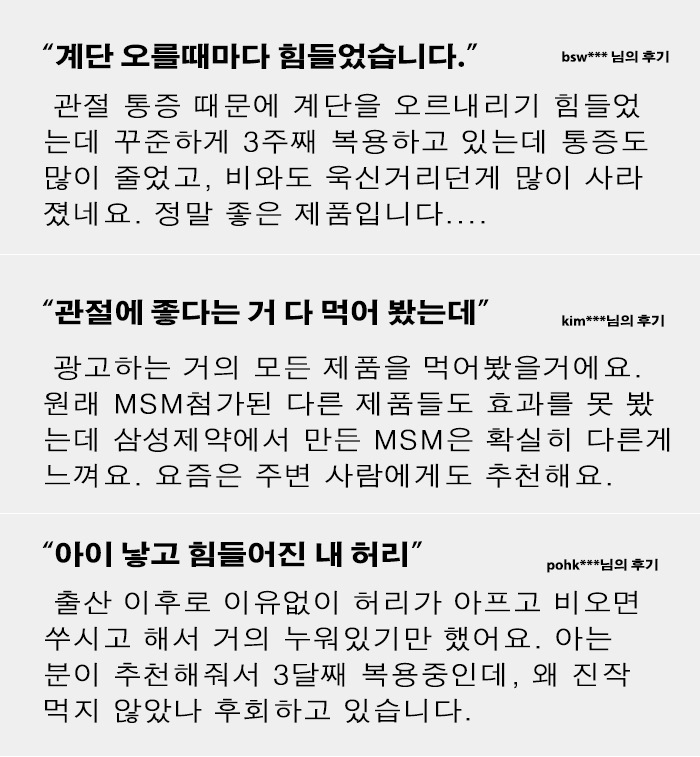
<style>
.page{position:relative;width:700px;height:757px;background:#efefef}
.page>*{position:absolute;margin:0}
.t1{font:27px "AdobeGothicStd-Bold";color:#000000;scale:1.11 1}
.t2{font:12.6px "AdobeGothicStd-Bold";color:#000000;scale:1.11 1}
.t3{font:27px/36px "H2gtrM";color:#000000;scale:1.11 1}
.t4{font:27px/30px "HYgprM";color:#000000;scale:1.11 1}
</style>
<div class="page">
<p class="t1" style="left:42px;top:43px;width:436px;height:27px">“계단 오를때마다 힘들었습니다.”</p>
<p class="t2" style="left:562px;top:50px;width:107px;height:13px">bsw*** 님의 후기</p>
<p class="t3" style="left:44px;top:93px;width:604px;height:133px"><span class="t4"> </span>관절 통증 때문에 계단을 오르내리기 힘들었<br>는데 꾸준하게 3주째 복용하고 있는데 통증도<br>많이 줄었고, 비와도 욱신거리던게 많이 사라<br>졌네요. 정말 좋은 제품입니다....</p>
<p class="t1" style="left:42px;top:299px;width:447px;height:27px">“관절에 좋다는 거 다 먹어 봤는데”</p>
<p class="t2" style="left:562px;top:314px;width:102px;height:13px">kim***님의 후기</p>
<p class="t3" style="left:44px;top:355px;width:626px;height:133px"><span class="t4"> </span>광고하는 거의 모든 제품을 먹어봤을거에요.<br>원래 MSM첨가된 다른 제품들도 효과를 못 봤<br>는데 삼성제약에서 만든 MSM은 확실히 다른게<br>느껴요. 요즘은 주변 사람에게도 추천해요.</p>
<p class="t1" style="left:42px;top:541px;width:380px;height:27px">“아이 낳고 힘들어진 내 허리”</p>
<p class="t2" style="left:547px;top:558px;width:111px;height:15px">pohk***님의 후기</p>
<p class="t3" style="left:45px;top:590px;width:593px;height:133px"><span class="t4"> </span>출산 이후로 이유없이 허리가 아프고 비오면<br>쑤시고 해서 거의 누워있기만 했어요. 아는<br>분이 추천해줘서 3달째 복용중인데, 왜 진작<br>먹지 않았나 후회하고 있습니다.</p>
</div>
